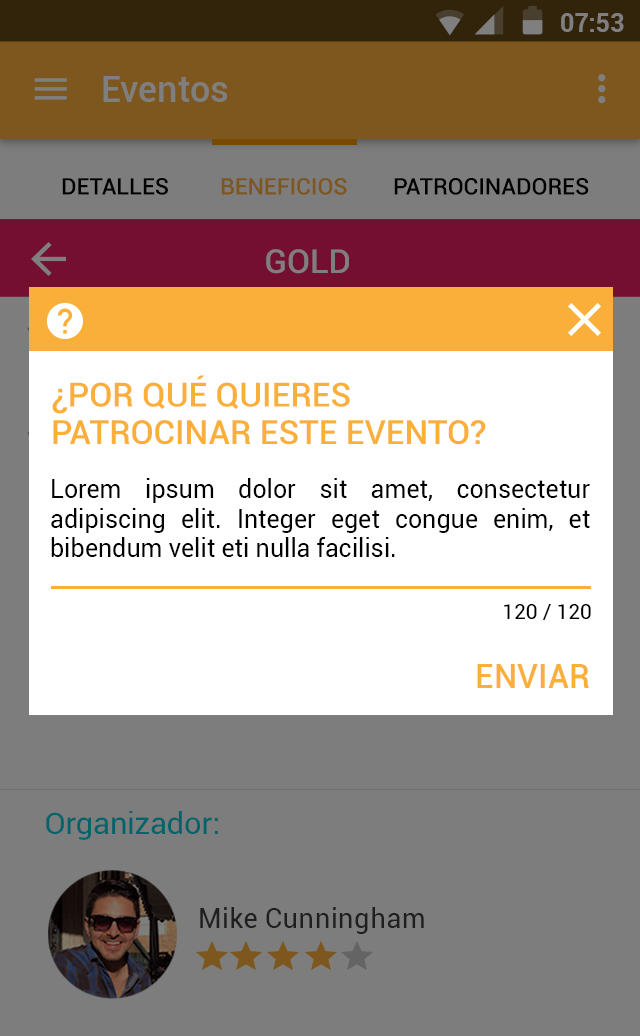
<style>
.page{position:relative;width:640px;height:1036px;background:#7d7d7d}
.page>*{position:absolute;margin:0}
.t1{font:24.9px "Roboto-Bold";color:#7f7f7f}
.t2{font:35.8px "Roboto-Medium";letter-spacing:0.005em;color:#7f7f7f}
.t3{font:22.9px "Roboto-Medium";color:#000000}
.t4{font:22.9px "Roboto-Medium";color:#7d571d}
.t5{font:33.3px "Roboto-Medium";color:#7f7f7f}
.t6{font:33.3px/37.5px "Roboto-Medium";color:#faaf3a}
.t7{font:25px/29.2px "Roboto-Regular";color:#000000}
.t8{font:20.8px "Roboto-Regular";color:#000000}
.t9{font:33.3px "Roboto-Medium";color:#faaf3a}
.t10{font:30.5px "Roboto-Regular";letter-spacing:0.01em;color:#00646a}
.t11{font:26.7px "Roboto-Regular";letter-spacing:0.01em;color:#1f1f1f}
</style>
<div class="page">
<p class="t1" style="left:561px;top:13px;width:63px;height:19px">07:53</p>
<p class="t2" style="left:103px;top:76px;width:125px;height:26px">Eventos</p>
<p class="t3" style="left:62px;top:178px;width:106px;height:17px">DETALLES</p>
<p class="t4" style="left:221px;top:178px;width:126px;height:17px">BENEFICIOS</p>
<p class="t3" style="left:394px;top:178px;width:195px;height:17px">PATROCINADORES</p>
<p class="t5" style="left:266px;top:249px;width:83px;height:25px">GOLD</p>
<p class="t6" style="left:52px;top:375px;width:434px;height:70px">¿POR QUÉ QUIERES <br>PATROCINAR ESTE EVENTO?</p>
<p class="t7" style="left:51px;top:478px;width:539px;height:79px;text-align:justify">Lorem ipsum dolor sit amet, consectetur adipiscing elit. Integer eget congue enim, et bibendum velit eti nulla facilisi.</p>
<p class="t8" style="left:504px;top:604px;width:87px;height:16px">120 / 120</p>
<p class="t9" style="left:477px;top:664px;width:112px;height:24px">ENVIAR</p>
<p class="t10" style="left:46px;top:811px;width:172px;height:29px">Organizador:</p>
<p class="t11" style="left:200px;top:907px;width:224px;height:27px">Mike Cunningham</p>
</div>
